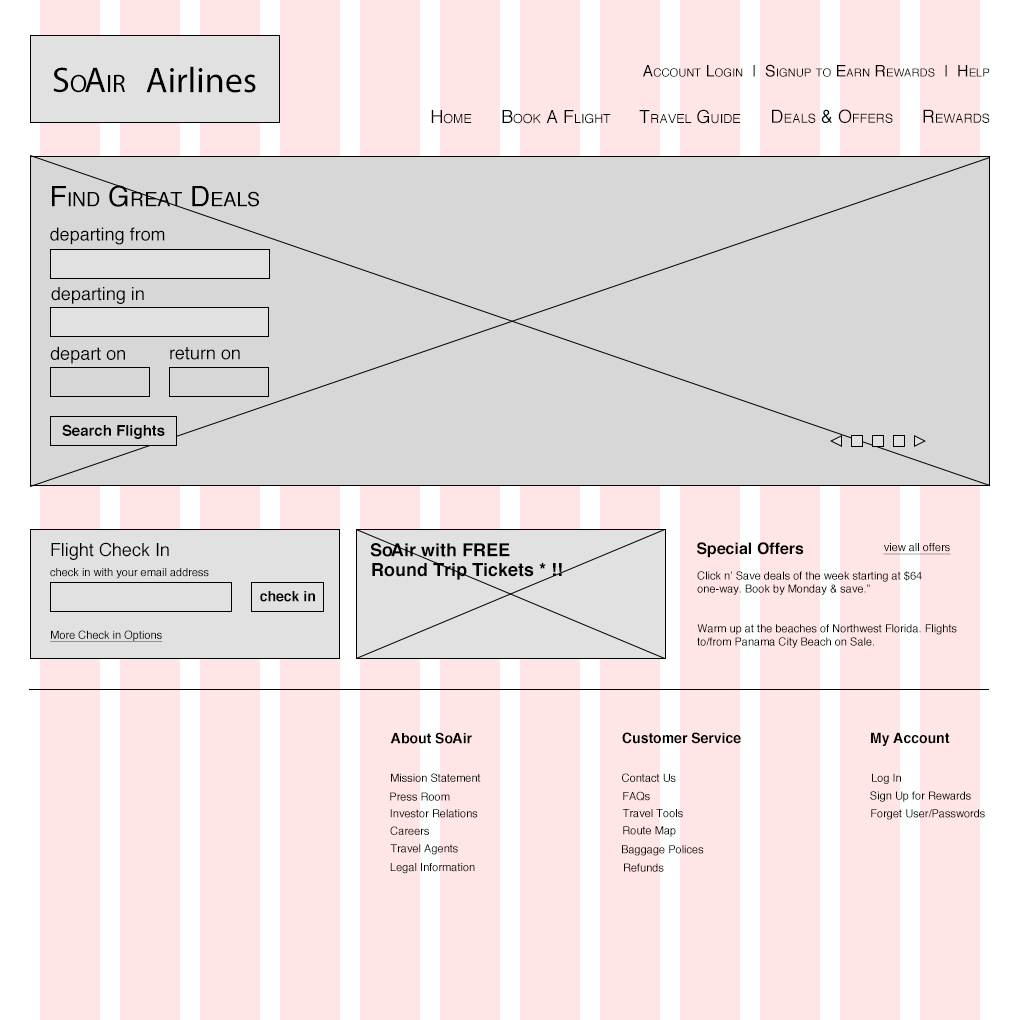
<style>
.page{position:relative;width:1020px;height:1020px;background:#ffe5e5}
.page>*{position:absolute;margin:0}
.t1{font:16px "Helvetica";color:#000000;font-variant:small-caps}
.t2{font:36px "MyriadPro-Regular";color:#000000;font-variant:small-caps}
.t3{font:36px "MyriadPro-Regular";color:#000000}
.t4{font:18px "Helvetica";color:#000000;font-variant:small-caps}
.t5{font:28px "Helvetica";color:#000000;font-variant:small-caps}
.t6{font:18px "Helvetica";color:#000000}
.t7{font:15px "Helvetica-Bold";color:#000000}
.t8{font:18px "Helvetica-Bold";color:#000000}
.t9{font:16px "Helvetica-Bold";color:#000000}
.t10{font:11px "Helvetica";color:#000000;text-decoration:underline}
.t11{font:11px "Helvetica";color:#000000}
.t12{font:14px "Helvetica-Bold";color:#000000}
</style>
<div class="page">
<p class="t1" style="left:643px;top:64px;width:347px;height:13px">Account Login  |  Signup to Earn Rewards  |  Help</p>
<p class="t2" style="left:53px;top:67px;width:72px;height:26px">SoAir</p>
<p class="t3" style="left:146px;top:66px;width:110px;height:27px">Airlines</p>
<p class="t4" style="left:431px;top:110px;width:41px;height:14px">Home</p>
<p class="t4" style="left:502px;top:110px;width:109px;height:14px">Book A Flight</p>
<p class="t4" style="left:639px;top:109px;width:101px;height:15px">Travel Guide</p>
<p class="t4" style="left:772px;top:109px;width:121px;height:14px">Deals &amp; Offers</p>
<p class="t4" style="left:923px;top:109px;width:67px;height:14px">Rewards</p>
<p class="t5" style="left:52px;top:185px;width:207px;height:22px">Find Great Deals</p>
<p class="t6" style="left:50px;top:227px;width:115px;height:18px">departing from</p>
<p class="t6" style="left:51px;top:287px;width:93px;height:17px">departing in</p>
<p class="t6" style="left:50px;top:346px;width:75px;height:18px">depart on</p>
<p class="t6" style="left:170px;top:347px;width:70px;height:13px">return on</p>
<p class="t7" style="left:62px;top:424px;width:103px;height:15px">Search Flights</p>
<p class="t6" style="left:51px;top:542px;width:118px;height:18px">Flight Check In</p>
<p class="t8" style="left:370px;top:543px;width:140px;height:14px">SoAir with FREE</p>
<p class="t9" style="left:697px;top:542px;width:107px;height:16px">Special Offers</p>
<p class="t10" style="left:883px;top:543px;width:68px;height:12px">view all offers</p>
<p class="t11" style="left:50px;top:568px;width:159px;height:11px">check in with your email address</p>
<p class="t8" style="left:372px;top:562px;width:190px;height:18px">Round Trip Tickets * !!</p>
<p class="t11" style="left:697px;top:571px;width:260px;height:77px">Click n’ Save deals of the week starting at $64 one-way. Book by Monday &amp; save.”<br><br><br>Warm up at the beaches of Northwest Florida. Flights to/from Panama City Beach on Sale.</p>
<p class="t12" style="left:260px;top:591px;width:55px;height:11px">check in</p>
<p class="t10" style="left:50px;top:630px;width:113px;height:12px">More Check in Options</p>
<p class="t12" style="left:390px;top:732px;width:82px;height:12px">About SoAir</p>
<p class="t12" style="left:622px;top:732px;width:119px;height:12px">Customer Service</p>
<p class="t12" style="left:871px;top:732px;width:79px;height:14px">My Account</p>
<p class="t11" style="left:391px;top:773px;width:90px;height:9px">Mission Statement</p>
<p class="t11" style="left:622px;top:773px;width:54px;height:9px">Contact Us</p>
<p class="t11" style="left:872px;top:773px;width:29px;height:11px">Log In</p>
<p class="t11" style="left:390px;top:792px;width:60px;height:9px">Press Room</p>
<p class="t11" style="left:623px;top:791px;width:27px;height:10px">FAQs</p>
<p class="t11" style="left:870px;top:791px;width:101px;height:11px">Sign Up for Rewards</p>
<p class="t11" style="left:390px;top:809px;width:88px;height:9px">Investor Relations</p>
<p class="t11" style="left:622px;top:809px;width:61px;height:9px">Travel Tools</p>
<p class="t11" style="left:871px;top:809px;width:114px;height:11px">Forget User/Passwords</p>
<p class="t11" style="left:390px;top:826px;width:39px;height:9px">Careers</p>
<p class="t11" style="left:623px;top:826px;width:53px;height:11px">Route Map</p>
<p class="t11" style="left:390px;top:844px;width:68px;height:11px">Travel Agents</p>
<p class="t11" style="left:622px;top:845px;width:82px;height:11px">Baggage Polices</p>
<p class="t11" style="left:390px;top:863px;width:85px;height:11px">Legal Information</p>
<p class="t11" style="left:624px;top:863px;width:40px;height:9px">Refunds</p>
</div>
